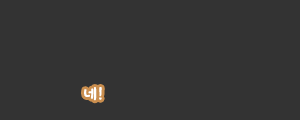
<style>
.page{position:relative;width:300px;height:120px;background:#333333}
.page>*{position:absolute;margin:0}
.t1{font:18px "KoreanCT-R";color:#ffffff}
</style>
<div class="page">
<p class="t1" style="left:84px;top:87px;width:18px;height:14px">네!</p>
</div>
